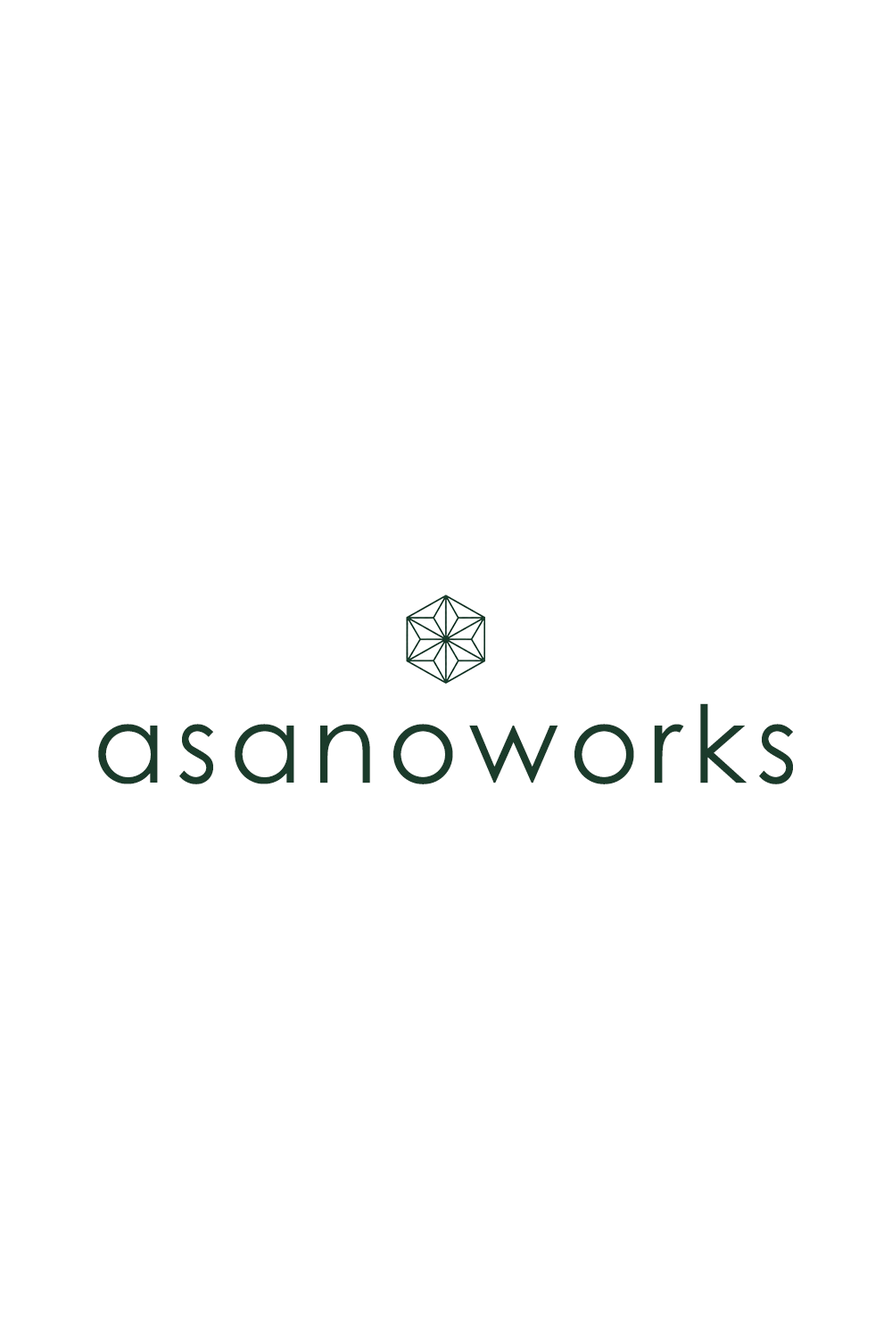
<style>
.page{position:relative;width:892px;height:1337px;background:#ffffff}
.page>*{position:absolute;margin:0}
.t1{font:106.9px "CenturyGothicPro";letter-spacing:0.1em;color:#1b3b2b}
</style>
<div class="page">
<p class="t1" style="left:98px;top:703px;width:695px;height:82px">asanoworks</p>
</div>
